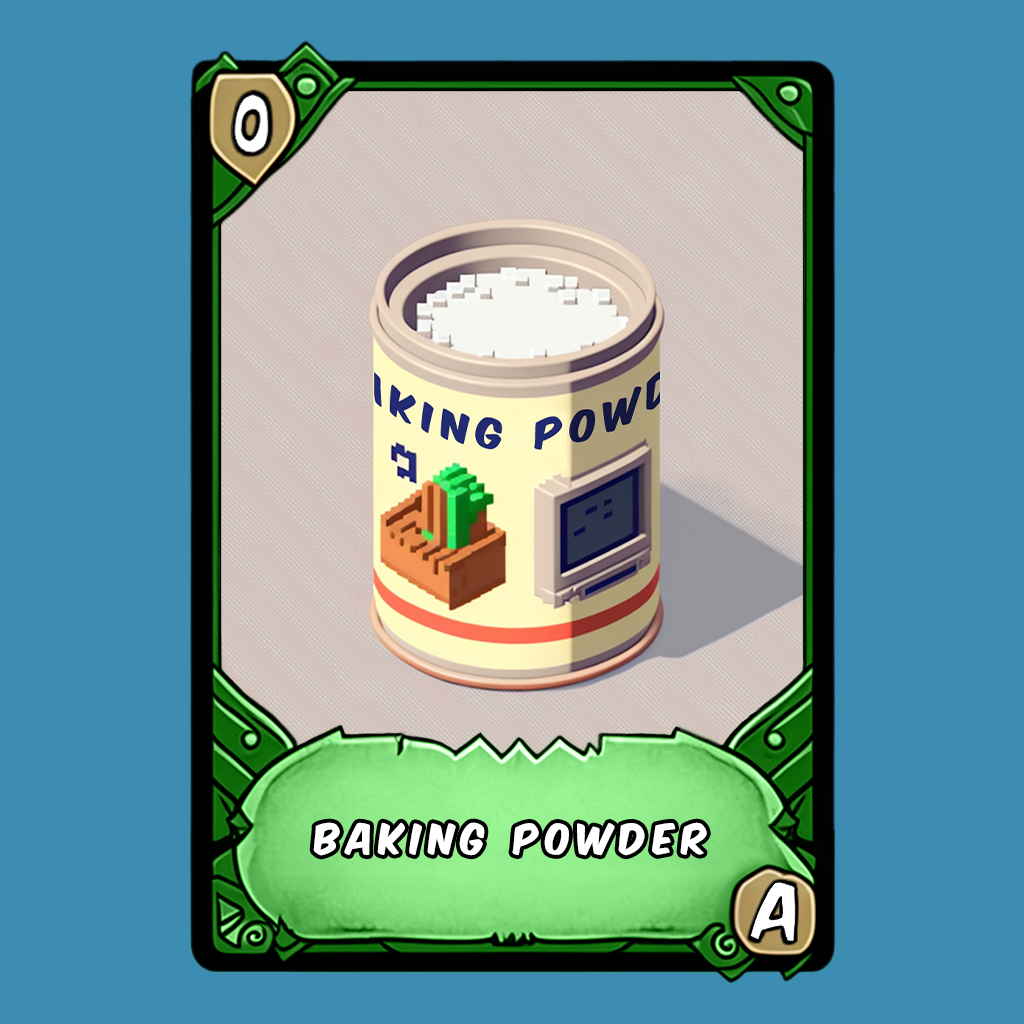
<style>
.page{position:relative;width:1024px;height:1024px;background:#3d8db2}
.page>*{position:absolute;margin:0}
.t1{font:36px "KomikaAxis";letter-spacing:0.2em;color:#ffffff}
</style>
<div class="page">
<p class="t1" style="left:313px;top:822px;width:394px;height:34px">baking powder</p>
</div>
